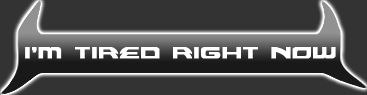
<style>
.page{position:relative;width:367px;height:95px;background:#333333}
.page>*{position:absolute;margin:0}
.t1{font:29px "Alexis";letter-spacing:0.01em;color:#ffffff;font-weight:bold;scale:1.06 1}
</style>
<div class="page">
<p class="t1" style="left:25px;top:47px;width:311px;height:12px">i’m tired right now</p>
</div>
